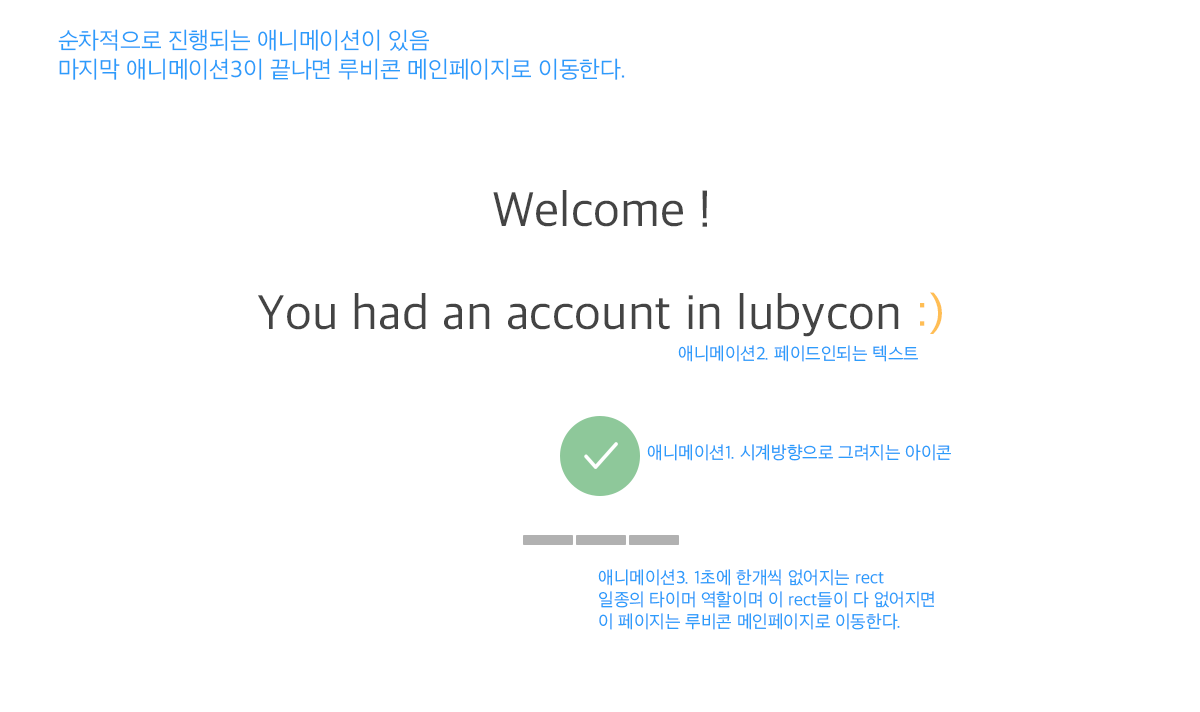
<style>
.page{position:relative;width:1200px;height:712px;background:#ffffff}
.page>*{position:absolute;margin:0}
.t1{font:24px "AppleSDGothicNeo-Light";color:#2c9cfb}
.t2{font:50px "AppleSDGothicNeo-Regular";color:#444444}
.t3{font:50px "AppleSDGothicNeo-Regular";color:#ffbe54}
.t4{font:18px "AppleSDGothicNeo-Light";color:#2c9cfb}
</style>
<div class="page">
<p class="t1" style="left:58px;top:29px;width:567px;height:51px">순차적으로 진행되는 애니메이션이 있음<br>마지막 애니메이션3이 끝나면 루비콘 메인페이지로 이동한다.</p>
<p class="t2" style="left:493px;top:190px;width:214px;height:37px">Welcome !</p>
<p class="t2" style="left:258px;top:292px;width:684px;height:45px">You had an account in lubycon <span class="t3">:)</span></p>
<p class="t4" style="left:678px;top:345px;width:240px;height:17px">애니메이션2. 페이드인되는 텍스트</p>
<p class="t4" style="left:647px;top:444px;width:304px;height:17px">애니메이션1. 시계방향으로 그려지는 아이콘</p>
<p class="t4" style="left:598px;top:569px;width:336px;height:61px">애니메이션3. 1초에 한개씩 없어지는 rect<br>일종의 타이머 역할이며 이 rect들이 다 없어지면<br>이 페이지는 루비콘 메인페이지로 이동한다.</p>
</div>
